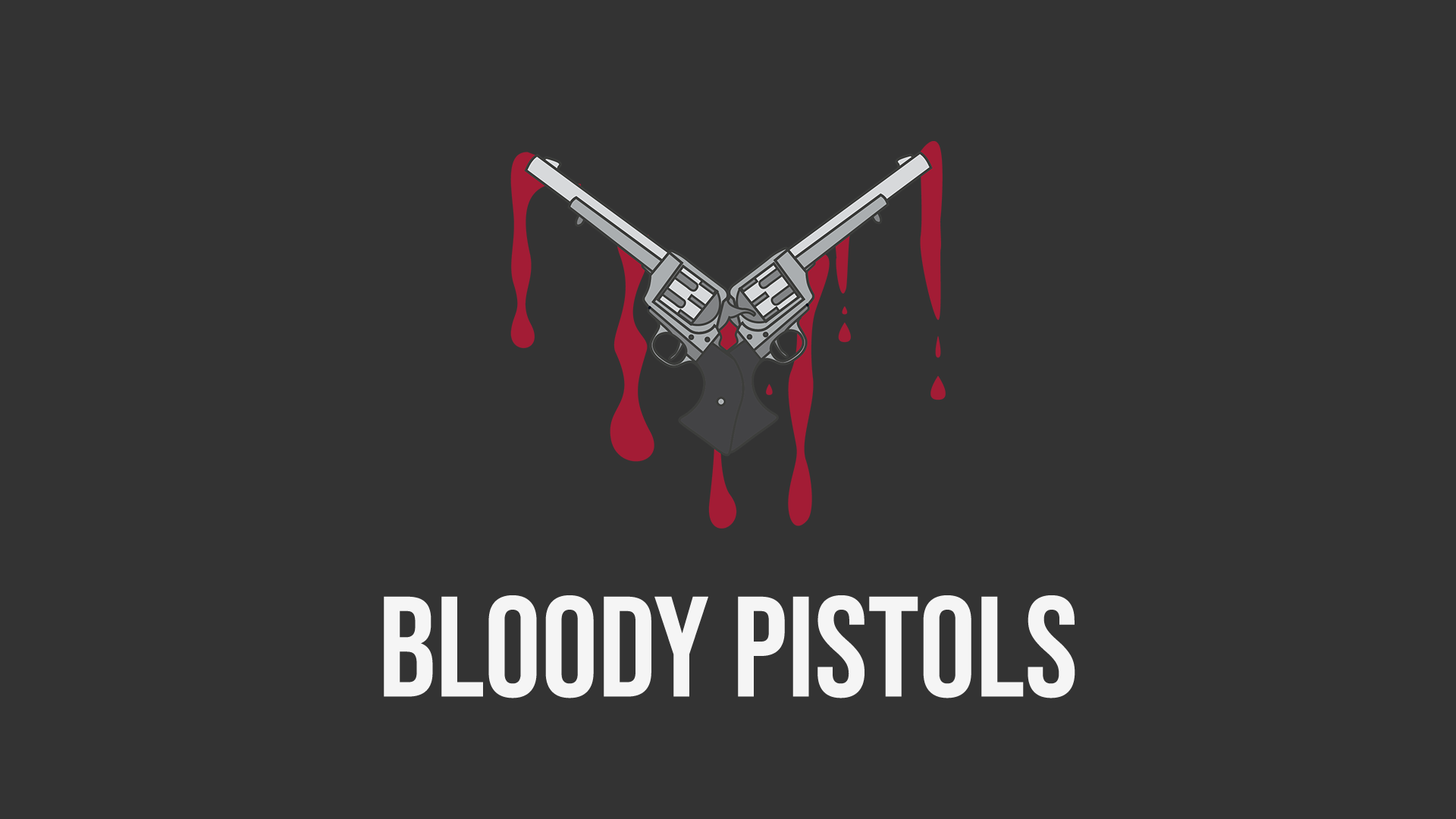
<style>
.page{position:relative;width:1456px;height:819px;background:#333333}
.page>*{position:absolute;margin:0}
.t1{font:142.4px "BebasNeue-Regular";color:#f5f5f5}
</style>
<div class="page">
<p class="t1" style="left:384px;top:595px;width:691px;height:103px">BLOODY PISTOLS</p>
</div>
